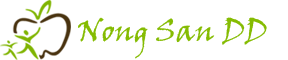
<style>
.page{position:relative;width:288px;height:60px;background:#ffffff}
.page>*{position:absolute;margin:0}
.t1{font:30px "VinerHandITC";color:#85bc02}
</style>
<div class="page">
<p class="t1" style="left:78px;top:17px;width:189px;height:42px">Nong San DD</p>
</div>
